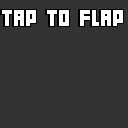
<style>
.page{position:relative;width:128px;height:128px;background:#333333}
.page>*{position:absolute;margin:0}
.t1{font:20.9px "04b19";color:#ffffff}
</style>
<div class="page">
<p class="t1" style="left:2px;top:10px;width:121px;height:16px">TAP TO FLAP</p>
</div>
